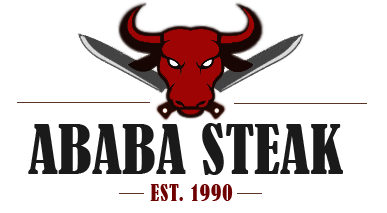
<style>
.page{position:relative;width:387px;height:213px;background:#ffffff}
.page>*{position:absolute;margin:0}
.t1{font:62.5px "BernardMT-Condensed";color:#1a1a1a}
.t2{font:20.8px "BernardMT-Condensed";letter-spacing:0.05em;color:#6f0000}
</style>
<div class="page">
<p class="t1" style="left:28px;top:123px;width:315px;height:52px">ABABA STEAK</p>
<p class="t2" style="left:150px;top:184px;width:83px;height:17px">EST. 1990</p>
</div>
